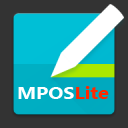
<style>
.page{position:relative;width:128px;height:128px;background:#333333}
.page>*{position:absolute;margin:0}
.t1{font:17.3px "SegoeUI-Bold";color:#ffffff;scale:1.15 1}
.t2{font:17.3px "SegoeUI-Bold";color:#ff2900;scale:1.15 1}
</style>
<div class="page">
<p class="t1" style="left:18px;top:86px;width:91px;height:13px">MPOS<span class="t2">Lite</span></p>
</div>
